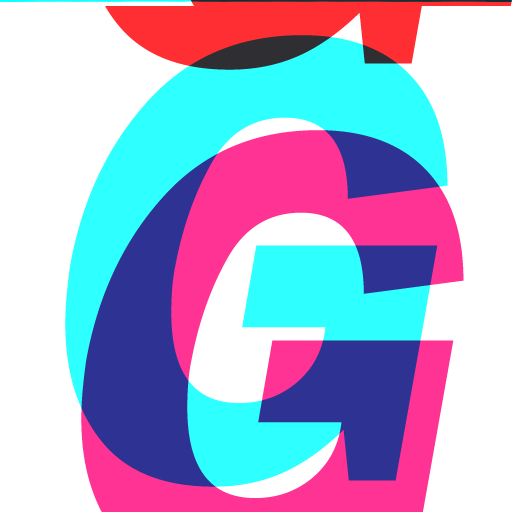
<style>
.page{position:relative;width:512px;height:512px;background:#ffffff}
.page>*{position:absolute;margin:0}
.t1{font:1015.8px "FreesiaUPCBoldItalic"}
</style>
<div class="page">
<p class="t1" style="left:65px;top:33px;width:383px;height:452px">G</p>
</div>
